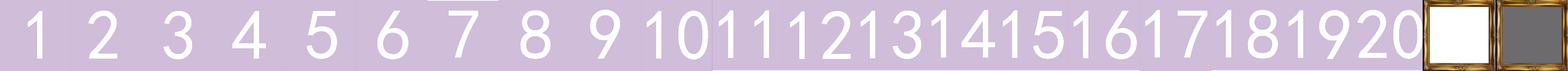
<style>
.page{position:relative;width:1568px;height:71px;background:#cfbdda}
.page>*{position:absolute;margin:0}
.t1{font:71.3px "SimHei";color:#ffffff;text-transform:uppercase}
</style>
<div class="page">
<p class="t1" style="left:28px;top:11px;width:14px;height:48px">1</p>
<p class="t1" style="left:88px;top:11px;width:29px;height:48px">2</p>
<p class="t1" style="left:164px;top:11px;width:28px;height:49px">3</p>
<p class="t1" style="left:232px;top:11px;width:34px;height:48px">4</p>
<p class="t1" style="left:306px;top:11px;width:31px;height:48px">5</p>
<p class="t1" style="left:377px;top:11px;width:31px;height:49px">6</p>
<p class="t1" style="left:449px;top:11px;width:29px;height:47px">7</p>
<p class="t1" style="left:520px;top:10px;width:31px;height:49px">8</p>
<p class="t1" style="left:590px;top:10px;width:30px;height:49px">9</p>
<p class="t1" style="left:647px;top:11px;width:61px;height:49px">10</p>
<p class="t1" style="left:719px;top:10px;width:50px;height:48px">11</p>
<p class="t1" style="left:790px;top:11px;width:61px;height:48px">12</p>
<p class="t1" style="left:861px;top:11px;width:60px;height:48px">13</p>
<p class="t1" style="left:932px;top:10px;width:63px;height:48px">14</p>
<p class="t1" style="left:1003px;top:10px;width:61px;height:49px">15</p>
<p class="t1" style="left:1074px;top:11px;width:63px;height:49px">16</p>
<p class="t1" style="left:1145px;top:10px;width:62px;height:48px">17</p>
<p class="t1" style="left:1217px;top:10px;width:61px;height:49px">18</p>
<p class="t1" style="left:1289px;top:10px;width:60px;height:49px">19</p>
<p class="t1" style="left:1358px;top:10px;width:65px;height:49px">20</p>
</div>
